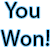
<style>
.page{position:relative;width:50px;height:50px;background:#ffffff}
.page>*{position:absolute;margin:0}
.t1{font:23px "MyriadPro-Regular";color:#000000}
</style>
<div class="page">
<p class="t1" style="left:1px;top:2px;width:49px;height:44px">You Won!</p>
</div>
